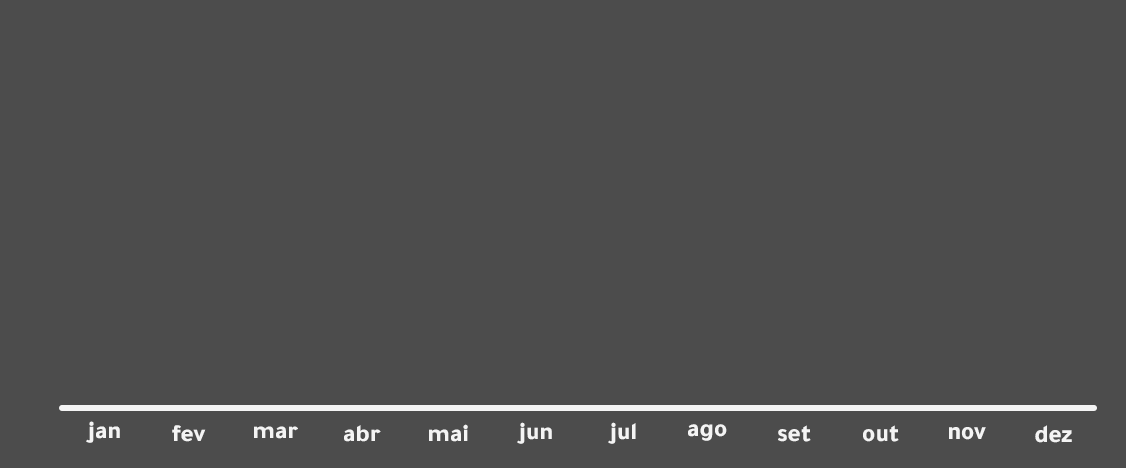
<style>
.page{position:relative;width:1126px;height:468px;background:#4c4c4c}
.page>*{position:absolute;margin:0}
.t1{font:24.9px "Tajawal-ExtraBold";color:#f4f4f4}
.t2{font:24.6px "Tajawal-ExtraBold";color:#f4f4f4}
.t3{font:25.1px "Tajawal-ExtraBold";color:#f4f4f4}
.t4{font:25.6px "Tajawal-ExtraBold";color:#f4f4f4}
.t5{font:25.8px "Tajawal-ExtraBold";color:#f4f4f4;scale:0.97 1}
</style>
<div class="page">
<p class="t1" style="left:86px;top:421px;width:34px;height:22px">jan</p>
<p class="t2" style="left:172px;top:425px;width:34px;height:17px">fev</p>
<p class="t2" style="left:344px;top:425px;width:37px;height:17px">abr</p>
<p class="t2" style="left:429px;top:424px;width:39px;height:18px">mai</p>
<p class="t2" style="left:517px;top:422px;width:35px;height:22px">jun</p>
<p class="t2" style="left:608px;top:422px;width:28px;height:22px">jul</p>
<p class="t3" style="left:688px;top:424px;width:39px;height:17px">ago</p>
<p class="t4" style="left:778px;top:425px;width:33px;height:17px">set</p>
<p class="t4" style="left:863px;top:425px;width:36px;height:17px">out</p>
<p class="t5" style="left:1035px;top:425px;width:37px;height:18px">dez</p>
<p class="t2" style="left:254px;top:426px;width:44px;height:13px">mar</p>
<p class="t5" style="left:949px;top:427px;width:37px;height:13px">nov</p>
</div>
